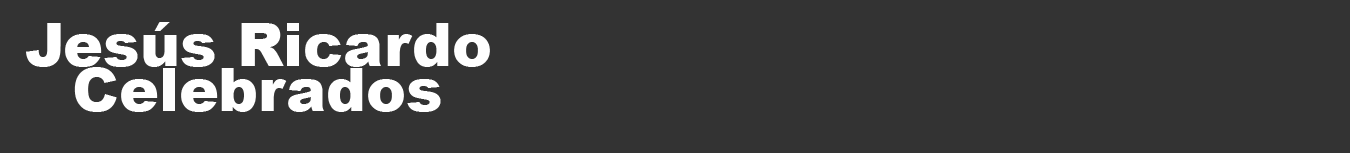
<style>
.page{position:relative;width:1350px;height:153px;background:#333333}
.page>*{position:absolute;margin:0}
.t1{font:60px "Arial-Black";color:#ffffff}
</style>
<div class="page">
<p class="t1" style="left:26px;top:22px;width:464px;height:45px">Jesús Ricardo</p>
<p class="t1" style="left:74px;top:67px;width:367px;height:45px">Celebrados</p>
</div>
